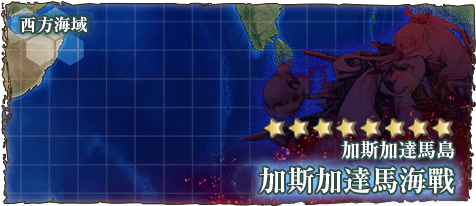
<style>
.page{position:relative;width:476px;height:206px}
.page>*{position:absolute;margin:0}
.t1{font:17px "RyuminPr6N-ExBold";color:#ffffff}
.t2{font:19px "RyuminPro-ExBold";color:#ffffff}
.t3{font:28px "RyuminPro-ExBold";color:#ffffff}
</style>
<div class="page">
<p class="t1" style="left:20px;top:16px;width:67px;height:17px">西方海域</p>
<p class="t2" style="left:341px;top:141px;width:114px;height:18px">加斯加達馬島</p>
<p class="t3" style="left:259px;top:167px;width:196px;height:27px">加斯加達馬海戰</p>
</div>
